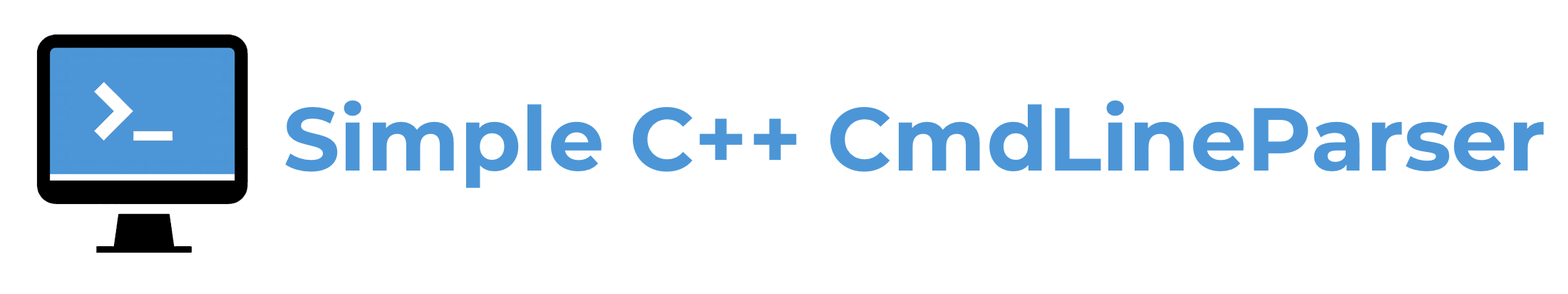
<style>
.page{position:relative;width:1568px;height:294px;background:#ffffff}
.page>*{position:absolute;margin:0}
.t1{font:89.1px "Montserrat-Bold";color:#4c96d7}
</style>
<div class="page">
<p class="t1" style="left:285px;top:100px;width:1259px;height:88px">Simple C++ CmdLineParser</p>
</div>
